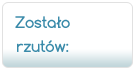
<style>
.page{position:relative;width:135px;height:70px;background:#ffffff}
.page>*{position:absolute;margin:0}
.t1{font:15px/23.6px "Comfortaa-Bold";letter-spacing:-0.02em;color:#398aa9}
</style>
<div class="page">
<p class="t1" style="left:15px;top:16px;width:55px;height:36px;text-align:center">Zostało<br>rzutów:</p>
</div>
